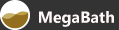
<style>
.page{position:relative;width:119px;height:30px;background:#333333}
.page>*{position:absolute;margin:0}
.t1{font:16px "LeelawadeeUI-Bold";color:#fff7f7}
</style>
<div class="page">
<p class="t1" style="left:39px;top:11px;width:75px;height:16px">MegaBath</p>
</div>
